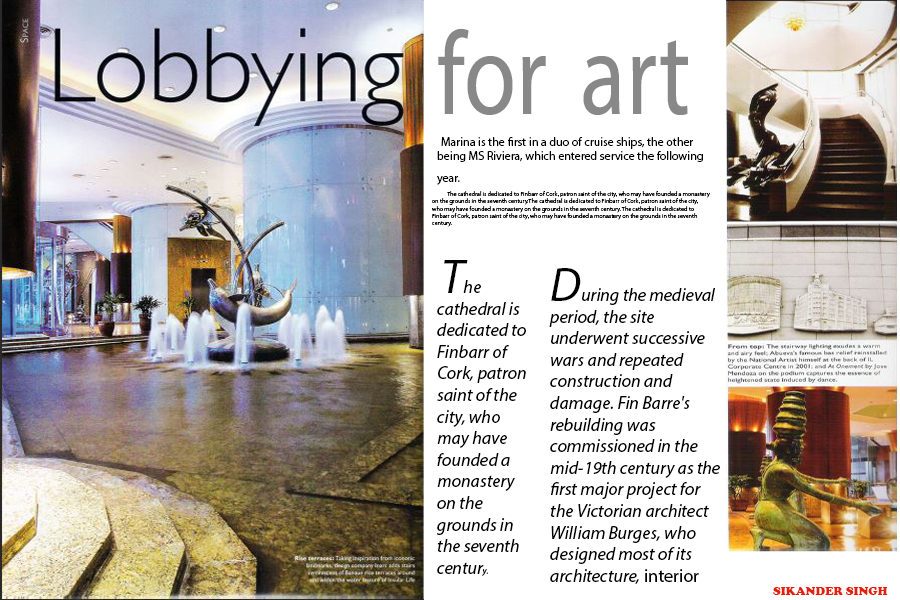
<style>
.page{position:relative;width:900px;height:600px;background:#ffffff}
.page>*{position:absolute;margin:0}
.t1{font:118px "MyriadPro-Regular";color:#888888;scale:0.81 1}
.t2{font:12px "MyriadPro-Regular";color:#000000}
.t3{font:18px "MyriadPro-Regular";color:#000000}
.t4{font:6px "MyriadPro-Regular";color:#000000}
.t5{font:72px "MyriadPro-Regular";color:#000000}
.t6{font:18px "MyriadPro-It";color:#000000}
.t7{font:48px "MyriadPro-It";color:#000000}
.t8{font:9px "MyriadPro-It";color:#000000}
.t9{font:12px "CooperBlack";color:#e41f0b}
</style>
<div class="page">
<p class="t1" style="left:438px;top:28px;width:250px;height:88px">for  art</p>
<p class="t2" style="left:437px;top:137px;width:266px;height:48px"><span class="t3"> </span>Marina is the first in a duo of cruise ships, the other being MS Riviera, which entered service the following year.</p>
<p class="t4" style="left:432px;top:191px;width:278px;height:36px"><span class="t5"> </span>The cathedral is dedicated to Finbarr of Cork, patron saint of the city, who may have founded a monastery on the grounds in the seventh century.The cathedral is dedicated to Finbarr of Cork, patron saint of the city, who may have founded a monastery on the grounds in the seventh century. The cathedral is dedicated to Finbarr of Cork, patron saint of the city, who may have founded a monastery on the grounds in the seventh century.</p>
<p class="t6" style="left:437px;top:260px;width:89px;height:316px"><span class="t3"> </span><span class="t7">T</span>he cathedral is dedicated to Finbarr of Cork, patron saint of the city, who may have founded a monastery on the grounds in the seventh centur<span class="t8">y.</span></p>
<p class="t6" style="left:549px;top:268px;width:171px;height:316px"><span class="t7">D</span>uring the medieval period, the site underwent successive wars and repeated construction and damage. Fin Barre's rebuilding was commissioned in the mid-19th century as the first major project for the Victorian architect William Burges, who designed most of its architecture,<span class="t3"> interior sculpture</span></p>
<p class="t9" style="left:773px;top:587px;width:115px;height:8px">SIKANDER SINGH</p>
</div>
